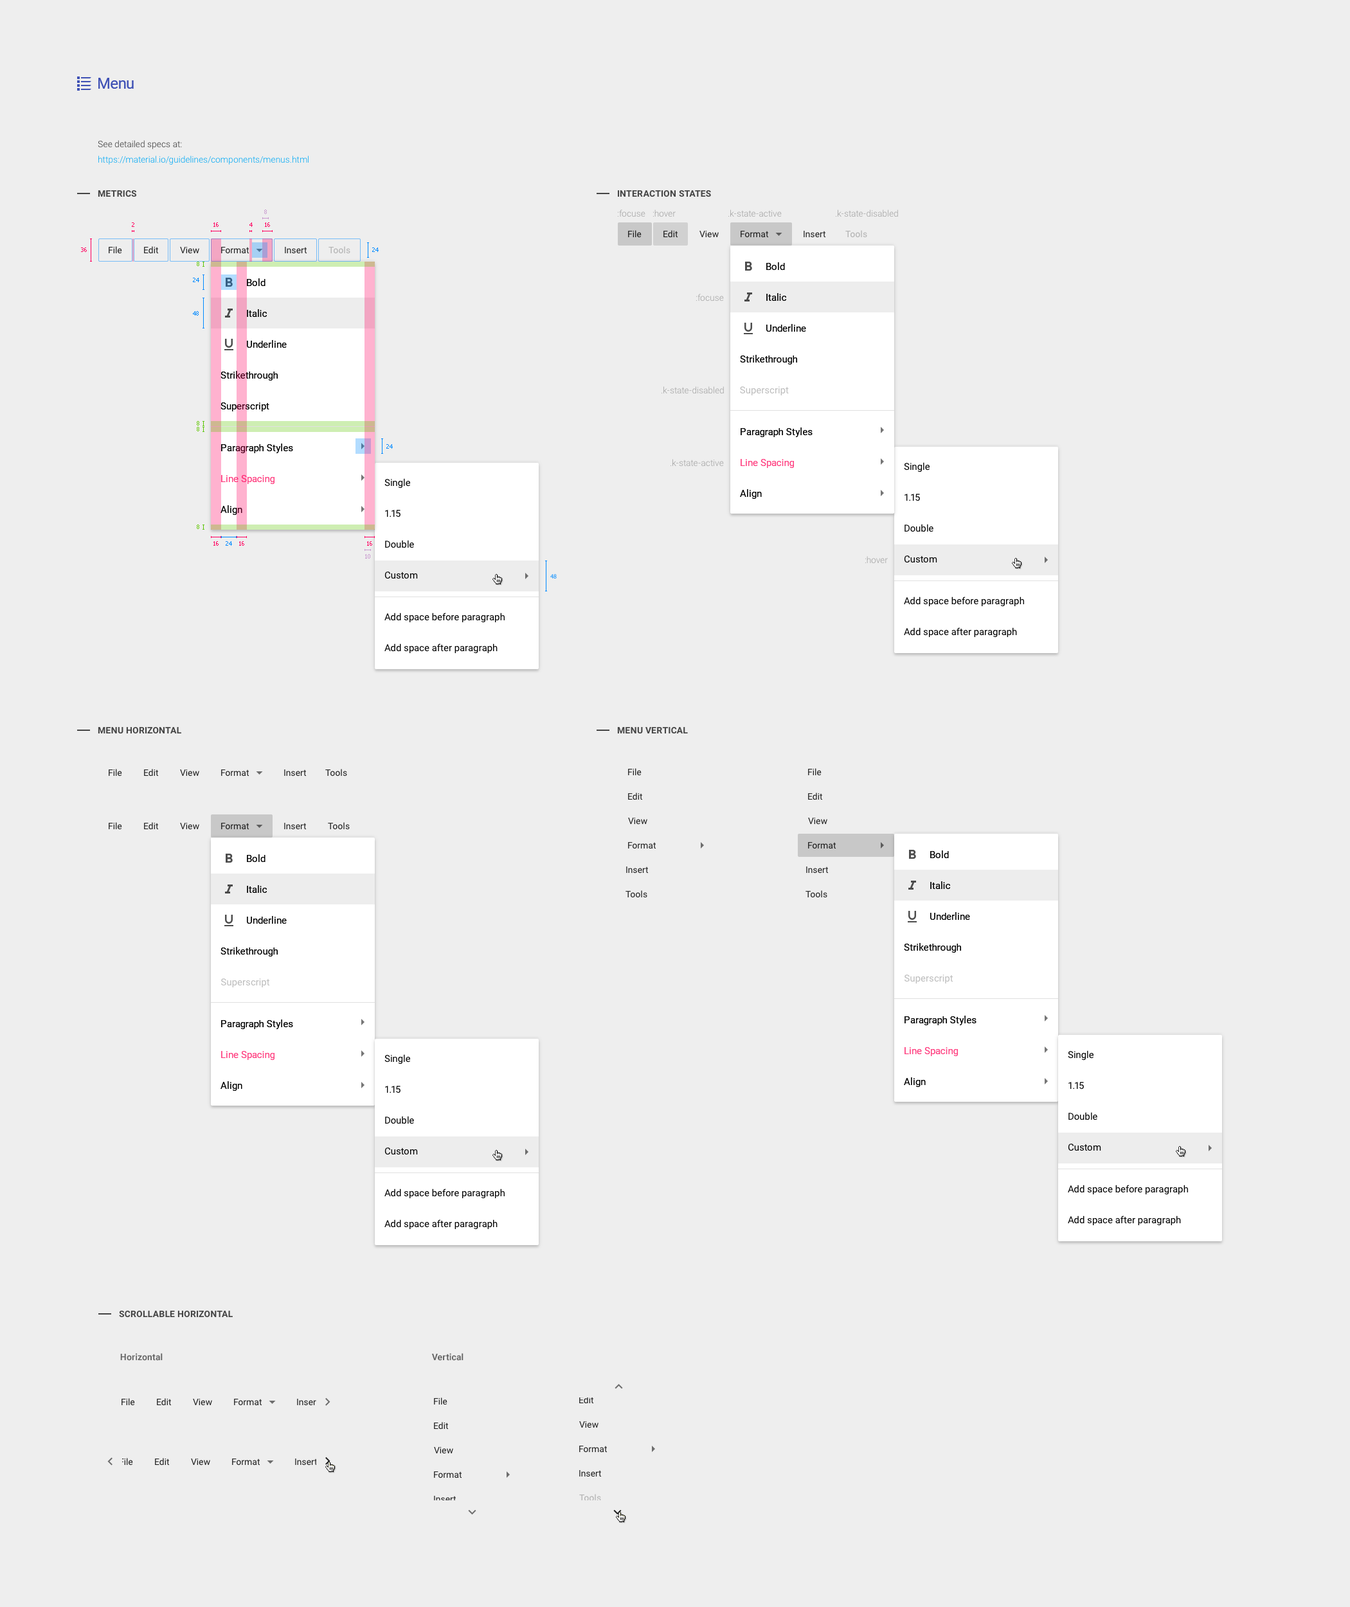
<style>
.page{position:relative;width:1350px;height:1607px;background:#eeeeee}
.page>*{position:absolute;margin:0}
.t1{font:15.4px "Roboto-Regular";letter-spacing:-0.025em;color:#3f51b5}
.t2{font:9px/15.4px "Roboto-Light";color:#03a9f4}
.t3{font:9px/15.4px "Roboto-Light";color:#383838}
.t4{font:9px "Roboto-Bold";letter-spacing:0.01em;color:#454545;text-transform:uppercase}
.t5{font:5.8px "Tahoma";color:#c99acf}
.t6{font:9px "Roboto-Light";color:#a1a1a1}
.t7{font:5.8px "Tahoma";color:#ff0060}
.t8{font:9px "Roboto-Regular";color:#1a1a1a}
.t9{font:9px "Roboto-Regular";color:#1b1b1b}
.t10{font:9px "Roboto-Regular";color:#1f1f1f}
.t11{font:9px "Roboto-Regular";color:#b0b0b0}
.t12{font:5.8px "Tahoma";color:#008aff}
.t13{font:5.8px "Tahoma";color:#5ec600}
.t14{font:9.6px/30.9px "Roboto-Regular";color:#000000}
.t15{font:9.6px/30.9px "Roboto-Regular";color:#ff4081}
.t16{font:9.6px "Roboto-Regular";color:#bdbdbd}
.t17{font:9px "Roboto-Bold";letter-spacing:0.01em;color:#656565}
.t18{font:9px "Roboto-Regular"}
</style>
<div class="page">
<p class="t1" style="left:98px;top:78px;width:36px;height:11px">Menu</p>
<p class="t2" style="left:98px;top:140px;width:211px;height:25px"><span class="t3">See detailed specs at:<br></span>https://material.io/guidelines/components/menus.html</p>
<p class="t4" style="left:98px;top:190px;width:39px;height:7px">Metrics</p>
<p class="t4" style="left:618px;top:190px;width:93px;height:7px">Interaction States</p>
<p class="t5" style="left:264px;top:210px;width:3px;height:4px">8</p>
<p class="t6" style="left:617px;top:210px;width:28px;height:7px">:focuse</p>
<p class="t6" style="left:652px;top:210px;width:24px;height:7px">:hover</p>
<p class="t6" style="left:728px;top:210px;width:54px;height:7px">.k-state-active</p>
<p class="t6" style="left:836px;top:210px;width:62px;height:7px">.k-state-disabled</p>
<p class="t7" style="left:132px;top:222px;width:2px;height:5px">2</p>
<p class="t7" style="left:213px;top:222px;width:6px;height:5px">16</p>
<p class="t7" style="left:249px;top:222px;width:4px;height:5px">4</p>
<p class="t7" style="left:265px;top:222px;width:5px;height:5px">16</p>
<p class="t8" style="left:628px;top:230px;width:14px;height:8px">File</p>
<p class="t9" style="left:663px;top:230px;width:15px;height:8px">Edit</p>
<p class="t10" style="left:699px;top:231px;width:20px;height:7px">View</p>
<p class="t8" style="left:741px;top:231px;width:28px;height:7px">Format</p>
<p class="t10" style="left:804px;top:231px;width:22px;height:7px">Insert</p>
<p class="t11" style="left:845px;top:230px;width:22px;height:8px">Tools</p>
<p class="t7" style="left:81px;top:248px;width:6px;height:4px">36</p>
<p class="t10" style="left:109px;top:246px;width:13px;height:8px">File</p>
<p class="t10" style="left:144px;top:246px;width:15px;height:8px">Edit</p>
<p class="t10" style="left:180px;top:247px;width:19px;height:7px">View</p>
<p class="t10" style="left:221px;top:247px;width:28px;height:7px">Format</p>
<p class="t10" style="left:285px;top:247px;width:22px;height:7px">Insert</p>
<p class="t11" style="left:328px;top:246px;width:22px;height:8px">Tools</p>
<p class="t12" style="left:372px;top:248px;width:7px;height:4px">24</p>
<p class="t13" style="left:197px;top:262px;width:2px;height:4px">8</p>
<p class="t14" style="left:740px;top:262px;width:73px;height:237px">Bold<br>Italic<br>Underline<br>Strikethrough<br><br>Paragraph Styles<br><span class="t15">Line Spacing<br></span>Align</p>
<p class="t12" style="left:193px;top:278px;width:6px;height:4px">24</p>
<p class="t14" style="left:221px;top:278px;width:72px;height:237px">Bold<br>Italic<br>Underline<br>Strikethrough<br>Superscript<br>Paragraph Styles<br><span class="t15">Line Spacing<br></span>Align</p>
<p class="t6" style="left:696px;top:294px;width:28px;height:8px">:focuse</p>
<p class="t12" style="left:193px;top:311px;width:6px;height:5px">48</p>
<p class="t6" style="left:662px;top:386px;width:62px;height:8px">.k-state-disabled</p>
<p class="t16" style="left:740px;top:386px;width:49px;height:10px">Superscript</p>
<p class="t13" style="left:197px;top:421px;width:2px;height:5px">8</p>
<p class="t13" style="left:197px;top:427px;width:2px;height:4px">8</p>
<p class="t12" style="left:386px;top:444px;width:7px;height:5px">24</p>
<p class="t6" style="left:670px;top:459px;width:54px;height:8px">.k-state-active</p>
<p class="t14" style="left:904px;top:462px;width:120px;height:176px">Single<br>1.15<br>Double<br>Custom<br>Add space before paragraph<br>Add space after paragraph</p>
<p class="t14" style="left:384px;top:478px;width:121px;height:176px">Single<br>1.15<br>Double<br>Custom<br>Add space before paragraph<br>Add space after paragraph</p>
<p class="t13" style="left:197px;top:525px;width:2px;height:4px">8</p>
<p class="t7" style="left:213px;top:541px;width:6px;height:5px">16</p>
<p class="t12" style="left:226px;top:541px;width:6px;height:5px">24</p>
<p class="t7" style="left:239px;top:541px;width:5px;height:5px">16</p>
<p class="t7" style="left:367px;top:541px;width:5px;height:5px">16</p>
<p class="t5" style="left:365px;top:554px;width:5px;height:5px">10</p>
<p class="t6" style="left:865px;top:556px;width:23px;height:8px">:hover</p>
<p class="t12" style="left:550px;top:574px;width:7px;height:5px">48</p>
<p class="t4" style="left:98px;top:727px;width:83px;height:7px">Menu Horizontal</p>
<p class="t4" style="left:617px;top:726px;width:71px;height:8px">Menu Vertical</p>
<p class="t10" style="left:109px;top:769px;width:13px;height:8px">File</p>
<p class="t10" style="left:144px;top:769px;width:15px;height:8px">Edit</p>
<p class="t10" style="left:180px;top:770px;width:19px;height:7px">View</p>
<p class="t10" style="left:221px;top:770px;width:28px;height:7px">Format</p>
<p class="t10" style="left:284px;top:770px;width:23px;height:7px">Insert</p>
<p class="t10" style="left:325px;top:769px;width:22px;height:8px">Tools</p>
<p class="t10" style="left:628px;top:768px;width:14px;height:8px">File</p>
<p class="t10" style="left:808px;top:768px;width:14px;height:8px">File</p>
<p class="t10" style="left:628px;top:793px;width:15px;height:7px">Edit</p>
<p class="t10" style="left:808px;top:793px;width:15px;height:7px">Edit</p>
<p class="t10" style="left:628px;top:818px;width:19px;height:7px">View</p>
<p class="t10" style="left:808px;top:818px;width:19px;height:7px">View</p>
<p class="t10" style="left:109px;top:822px;width:13px;height:8px">File</p>
<p class="t10" style="left:144px;top:822px;width:15px;height:8px">Edit</p>
<p class="t10" style="left:180px;top:823px;width:19px;height:7px">View</p>
<p class="t8" style="left:221px;top:823px;width:28px;height:7px">Format</p>
<p class="t10" style="left:284px;top:823px;width:23px;height:7px">Insert</p>
<p class="t10" style="left:328px;top:822px;width:22px;height:8px">Tools</p>
<p class="t10" style="left:628px;top:842px;width:28px;height:7px">Format</p>
<p class="t8" style="left:808px;top:842px;width:28px;height:7px">Format</p>
<p class="t14" style="left:221px;top:854px;width:72px;height:237px">Bold<br>Italic<br>Underline<br>Strikethrough<br><br>Paragraph Styles<br><span class="t15">Line Spacing<br></span>Align</p>
<p class="t14" style="left:904px;top:851px;width:73px;height:236px">Bold<br>Italic<br>Underline<br>Strikethrough<br><br>Paragraph Styles<br><span class="t15">Line Spacing<br></span>Align</p>
<p class="t10" style="left:626px;top:867px;width:23px;height:7px">Insert</p>
<p class="t10" style="left:806px;top:867px;width:23px;height:7px">Insert</p>
<p class="t10" style="left:626px;top:890px;width:21px;height:8px">Tools</p>
<p class="t10" style="left:806px;top:890px;width:21px;height:8px">Tools</p>
<p class="t16" style="left:905px;top:975px;width:48px;height:9px">Superscript</p>
<p class="t16" style="left:221px;top:978px;width:49px;height:10px">Superscript</p>
<p class="t14" style="left:384px;top:1054px;width:121px;height:176px">Single<br>1.15<br>Double<br>Custom<br>Add space before paragraph<br>Add space after paragraph</p>
<p class="t14" style="left:1068px;top:1050px;width:120px;height:176px">Single<br>1.15<br>Double<br>Custom<br>Add space before paragraph<br>Add space after paragraph</p>
<p class="t4" style="left:119px;top:1310px;width:114px;height:8px">Scrollable Horizontal</p>
<p class="t17" style="left:120px;top:1353px;width:43px;height:8px">Horizontal</p>
<p class="t17" style="left:431px;top:1353px;width:33px;height:8px">Vertical</p>
<p class="t10" style="left:434px;top:1398px;width:13px;height:7px">File</p>
<p class="t10" style="left:579px;top:1396px;width:15px;height:8px">Edit</p>
<p class="t10" style="left:122px;top:1398px;width:13px;height:8px">File</p>
<p class="t10" style="left:157px;top:1398px;width:15px;height:8px">Edit</p>
<p class="t10" style="left:193px;top:1399px;width:19px;height:7px">View</p>
<p class="t10" style="left:234px;top:1399px;width:28px;height:7px">Format</p>
<p class="t10" style="left:297px;top:1399px;width:23px;height:7px">Insert</p>
<p class="t10" style="left:434px;top:1422px;width:15px;height:8px">Edit</p>
<p class="t10" style="left:579px;top:1421px;width:19px;height:7px">View</p>
<p class="t10" style="left:579px;top:1446px;width:29px;height:7px">Format</p>
<p class="t10" style="left:434px;top:1447px;width:19px;height:7px">View</p>
<p class="t10" style="left:120px;top:1458px;width:13px;height:8px">File</p>
<p class="t10" style="left:155px;top:1458px;width:15px;height:8px">Edit</p>
<p class="t10" style="left:191px;top:1459px;width:19px;height:7px">View</p>
<p class="t10" style="left:232px;top:1459px;width:28px;height:7px">Format</p>
<p class="t10" style="left:295px;top:1459px;width:23px;height:7px">Insert</p>
<p class="t10" style="left:434px;top:1472px;width:28px;height:7px">Format</p>
<p class="t10" style="left:579px;top:1470px;width:23px;height:7px">Insert</p>
<p class="t11" style="left:579px;top:1494px;width:22px;height:8px">Tools</p>
<p class="t18" style="left:434px;top:1496px;width:22px;height:7px">Insert</p>
</div>
